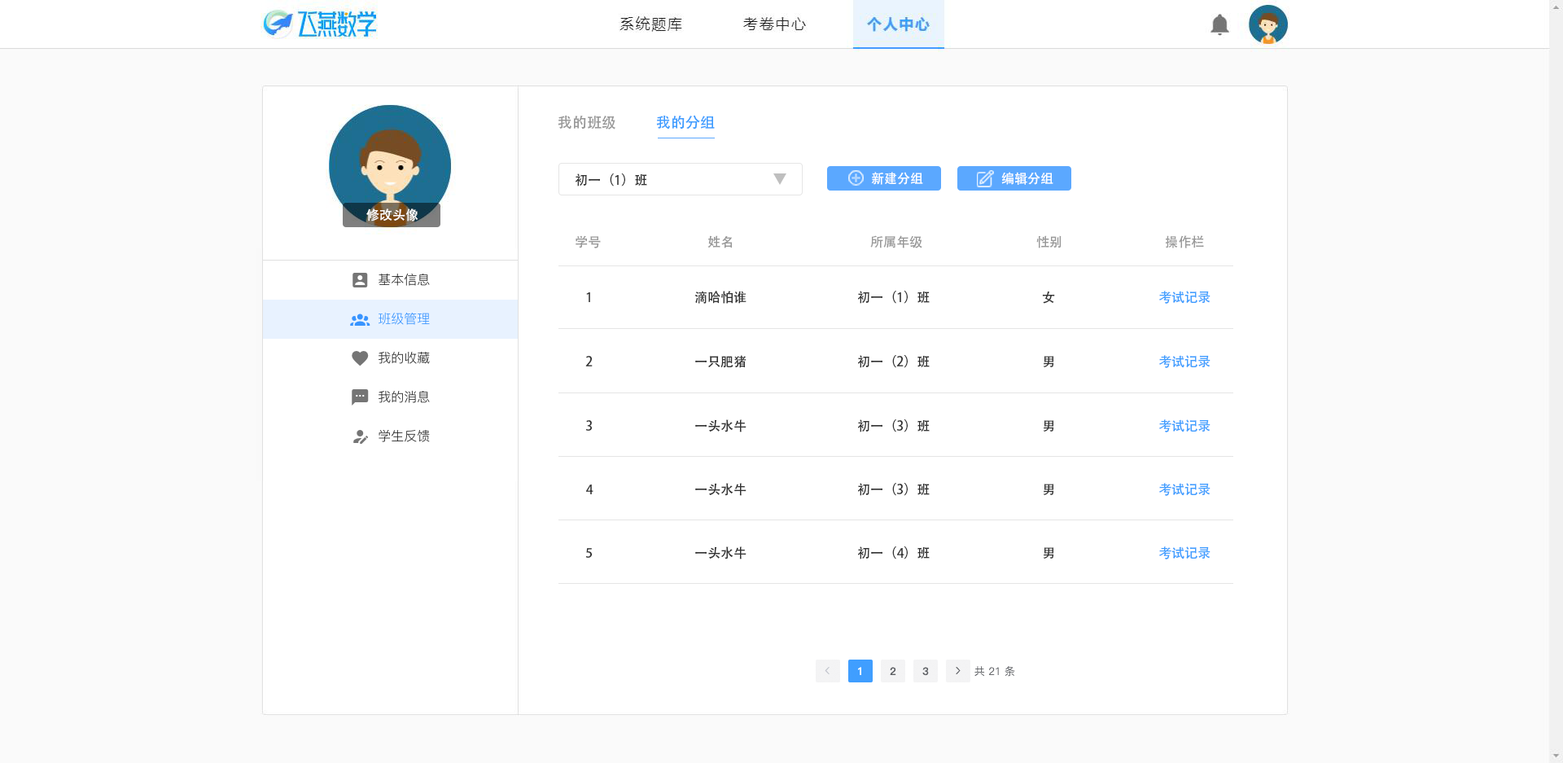
<style>
.page{position:relative;width:1563px;height:763px;background:#ffffff}
.page>*{position:absolute;margin:0}
.t1{font:14.7px "AdobeHeitiStd-Regular";color:#999999}
.t2{font:14.7px "AdobeHeitiStd-Regular";color:#409eff}
.t3{font:13px "AdobeHeitiStd-Regular";color:#333333}
.t4{font:13px "AdobeHeitiStd-Regular";color:#ffffff}
.t5{font:13px "AdobeHeitiStd-Regular";color:#999999}
.t6{font:13px "AdobeHeitiStd-Regular";color:#409eff}
</style>
<div class="page">
<p class="t1" style="left:558px;top:115px;width:57px;height:14px">我的班级</p>
<p class="t2" style="left:656px;top:115px;width:59px;height:14px">我的分组</p>
<p class="t3" style="left:576px;top:173px;width:71px;height:13px">初一（1）班</p>
<p class="t4" style="left:871px;top:172px;width:52px;height:13px">新建分组</p>
<p class="t4" style="left:1001px;top:172px;width:52px;height:13px">编辑分组</p>
<p class="t4" style="left:366px;top:208px;width:52px;height:13px">修改头像</p>
<p class="t5" style="left:576px;top:235px;width:25px;height:13px">学号</p>
<p class="t5" style="left:707px;top:235px;width:26px;height:13px">姓名</p>
<p class="t5" style="left:870px;top:235px;width:52px;height:13px">所属年级</p>
<p class="t5" style="left:1036px;top:235px;width:26px;height:13px">性别</p>
<p class="t5" style="left:1165px;top:235px;width:39px;height:13px">操作栏</p>
<p class="t3" style="left:586px;top:292px;width:4px;height:10px">1</p>
<p class="t3" style="left:694px;top:291px;width:53px;height:13px">滴哈怕谁</p>
<p class="t3" style="left:858px;top:291px;width:72px;height:13px">初一（1）班</p>
<p class="t3" style="left:1042px;top:291px;width:13px;height:13px">女</p>
<p class="t6" style="left:1159px;top:291px;width:52px;height:13px">考试记录</p>
<p class="t3" style="left:585px;top:356px;width:8px;height:10px">2</p>
<p class="t3" style="left:695px;top:355px;width:52px;height:13px">一只肥猪</p>
<p class="t3" style="left:858px;top:355px;width:72px;height:13px">初一（2）班</p>
<p class="t3" style="left:1043px;top:356px;width:11px;height:11px">男</p>
<p class="t6" style="left:1159px;top:355px;width:52px;height:13px">考试记录</p>
<p class="t3" style="left:585px;top:420px;width:8px;height:11px">3</p>
<p class="t3" style="left:695px;top:419px;width:52px;height:13px">一头水牛</p>
<p class="t3" style="left:858px;top:419px;width:72px;height:13px">初一（3）班</p>
<p class="t3" style="left:1043px;top:420px;width:11px;height:11px">男</p>
<p class="t6" style="left:1159px;top:419px;width:52px;height:13px">考试记录</p>
<p class="t3" style="left:586px;top:484px;width:8px;height:10px">4</p>
<p class="t3" style="left:695px;top:483px;width:52px;height:13px">一头水牛</p>
<p class="t3" style="left:858px;top:483px;width:72px;height:13px">初一（3）班</p>
<p class="t3" style="left:1043px;top:484px;width:11px;height:11px">男</p>
<p class="t6" style="left:1159px;top:483px;width:52px;height:13px">考试记录</p>
<p class="t3" style="left:585px;top:548px;width:8px;height:10px">5</p>
<p class="t3" style="left:695px;top:546px;width:52px;height:13px">一头水牛</p>
<p class="t3" style="left:858px;top:546px;width:72px;height:13px">初一（4）班</p>
<p class="t3" style="left:1043px;top:547px;width:11px;height:11px">男</p>
<p class="t6" style="left:1159px;top:546px;width:52px;height:13px">考试记录</p>
</div>
